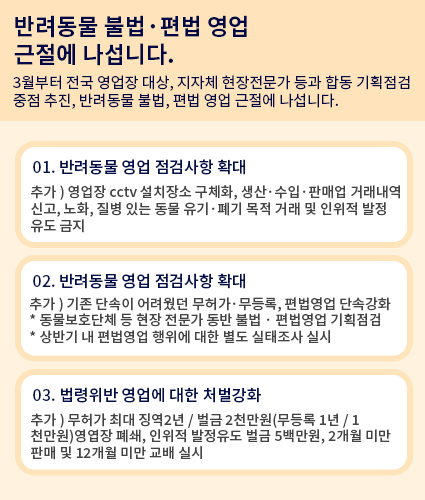
<style>
.page{position:relative;width:425px;height:500px;background:#ffffff}
.page>*{position:absolute;margin:0}
.t1{font:23px "NotoSansKR-Bold";color:#000848}
.t2{font:15px "NotoSansKR-Regular";color:#000848}
.t3{font:16px "NotoSansKR-Medium";color:#010f4c}
.t4{font:14px "NotoSansKR-Medium";color:#444444}
.t5{font:15.9px "NotoSansKR-Medium";color:#010f4c}
.t6{font:13.9px "NotoSansKR-Medium";color:#444444}
</style>
<div class="page">
<p class="t1" style="left:14px;top:15px;width:233px;height:51px">반려동물 불법·편법 영업 <br>근절에 나섭니다.</p>
<p class="t2" style="left:13px;top:75px;width:397px;height:34px">3월부터 전국 영업장 대상, 지자체 현장전문가 등과 합동 기획점검<br>중점 추진, 반려동물 불법, 편법 영업 근절에 나섭니다.</p>
<p class="t3" style="left:33px;top:159px;width:212px;height:16px">01. 반려동물 영업 점검사항 확대</p>
<p class="t4" style="left:31px;top:185px;width:369px;height:48px">추가 ) 영업장 cctv 설치장소 구체화, 생산·수입·판매업 거래내역 <br>신고, 노화, 질병 있는 동물 유기·폐기 목적 거래 및 인위적 발정 유도 금지</p>
<p class="t5" style="left:33px;top:273px;width:212px;height:16px">02. 반려동물 영업 점검사항 확대</p>
<p class="t6" style="left:30px;top:297px;width:361px;height:47px">추가 ) 기존 단속이 어려웠던 무허가·무등록, 편법영업 단속강화<br>* 동물보호단체 등 현장 전문가 동반 불법 · 편법영업 기획점검<br>* 상반기 내 편법영업 행위에 대한 별도 실태조사 실시</p>
<p class="t5" style="left:33px;top:387px;width:228px;height:16px">03. 법령위반 영업에 대한 처벌강화</p>
<p class="t6" style="left:31px;top:413px;width:360px;height:47px">추가 ) 무허가 최대 징역2년 / 벌금 2천만원(무등록 1년 / 1천만원)영엽장 폐쇄, 인위적 발정유도 벌금 5백만원, 2개월 미만 판매 및 12개월 미만 교배 실시</p>
</div>
